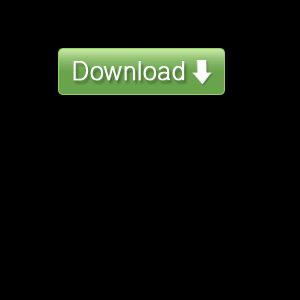
<style>
.page{position:relative;width:300px;height:300px;background:#000000}
.page>*{position:absolute;margin:0}
.t1{font:26.7px "District-Thin";color:#ffffff;font-weight:bold}
</style>
<div class="page">
<p class="t1" style="left:73px;top:61px;width:112px;height:20px">Download</p>
</div>
